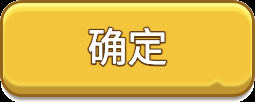
<style>
.page{position:relative;width:255px;height:102px;background:#f3c53d}
.page>*{position:absolute;margin:0}
.t1{font:40px/40px "WebPSD-18463539-0-Regular";color:#ffffff}
</style>
<div class="page">
<p class="t1" style="left:8px;top:4px;width:239px;height:86px;text-align:center">确定</p>
</div>
